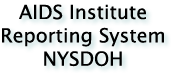
<style>
.page{position:relative;width:180px;height:80px;background:#ffffff}
.page>*{position:absolute;margin:0}
.t1{font:19.4px "LucidaSans";color:#000000}
</style>
<div class="page">
<p class="t1" style="left:2px;top:4px;width:162px;height:63px;text-align:center">AIDS Institute<br>Reporting System<br>NYSDOH</p>
</div>
